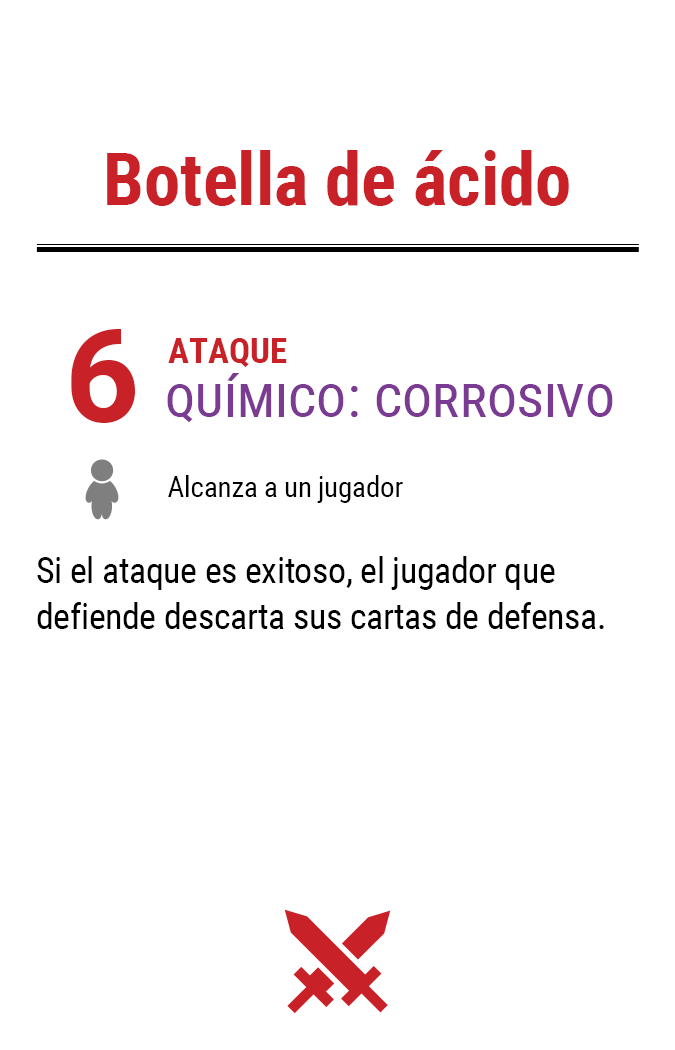
<style>
.page{position:relative;width:675px;height:1050px;background:#ffffff}
.page>*{position:absolute;margin:0}
.t1{font:72.9px "RobotoCondensed-Bold";color:#c82127}
.t2{font:130px "Roboto-Bold";letter-spacing:-0.06em;color:#c82127}
.t3{font:35px "RobotoCondensed-Bold";color:#c82127}
.t4{font:58.3px "RobotoCondensed-Regular";color:#7c3b92;font-variant:small-caps}
.t5{font:29.2px "RobotoCondensed-Regular";letter-spacing:-0.01em;color:#000000}
.t6{font:35.8px/45.8px "RobotoCondensed-Regular";letter-spacing:-0.01em;color:#000000}
</style>
<div class="page">
<p class="t1" style="left:107px;top:150px;width:462px;height:56px">Botella de ácido</p>
<p class="t2" style="left:71px;top:329px;width:65px;height:94px">6</p>
<p class="t3" style="left:168px;top:338px;width:119px;height:29px">ATAQUE</p>
<p class="t4" style="left:167px;top:373px;width:446px;height:50px">químico: corrosivo</p>
<p class="t5" style="left:168px;top:475px;width:235px;height:28px">Alcanza a un jugador</p>
<p class="t6" style="left:37px;top:556px;width:567px;height:73px">Si el ataque es exitoso, el jugador que defiende descarta sus cartas de defensa.</p>
</div>
